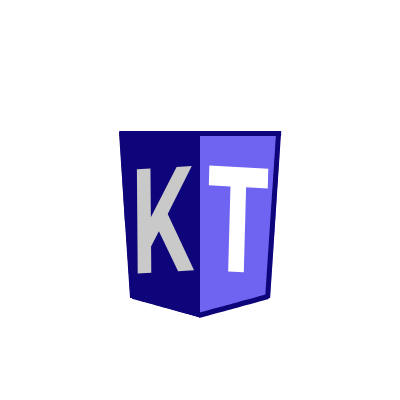
<style>
.page{position:relative;width:400px;height:400px;background:#ffffff}
.page>*{position:absolute;margin:0}
.t1{font:149px "Montserrat-Bold";color:#c9c9c9;scale:0.57 1}
.t2{font:149.7px "Montserrat-Bold";color:#ffffff;scale:0.65 1}
</style>
<div class="page">
<p class="t1" style="left:136px;top:166px;width:58px;height:108px;rotate:-3deg">K</p>
<p class="t2" style="left:208px;top:165px;width:61px;height:108px;rotate:3deg">T</p>
</div>
